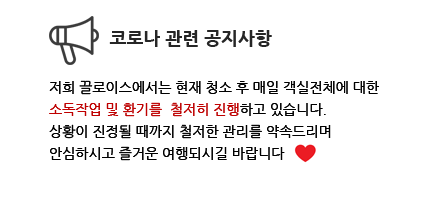
<style>
.page{position:relative;width:438px;height:200px;background:#ffffff}
.page>*{position:absolute;margin:0}
.t1{font:14px/22px "NanumGothic";color:#000000}
.t2{font:14px/22px "NanumGothic";color:#c00000}
</style>
<div class="page">
<p class="t1" style="left:49px;top:80px;width:330px;height:81px">저희 끌로이스에서는 현재 청소 후 매일 객실전체에 대한 <br><span class="t2">소독작업 및 환기를  철저히 진행</span>하고 있습니다.<br>상황이 진정될 때까지 철저한 관리를 약속드리며<br>안심하시고 즐거운 여행되시길 바랍니다</p>
</div>
